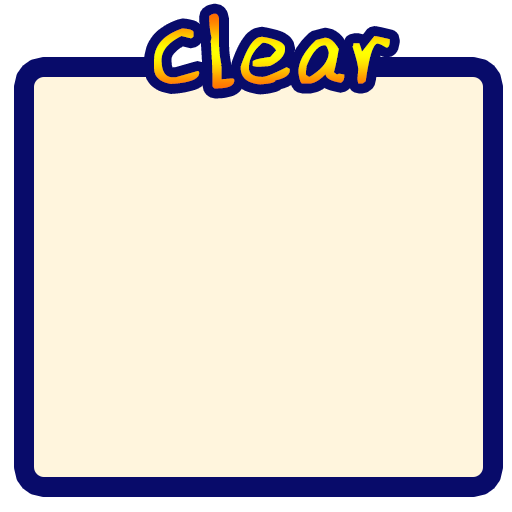
<style>
.page{position:relative;width:512px;height:512px;background:#fff5dd}
.page>*{position:absolute;margin:0}
.t1{font:120px "SentyMARUKO"}
</style>
<div class="page">
<p class="t1" style="left:154px;top:13px;width:236px;height:76px">Clear</p>
</div>
